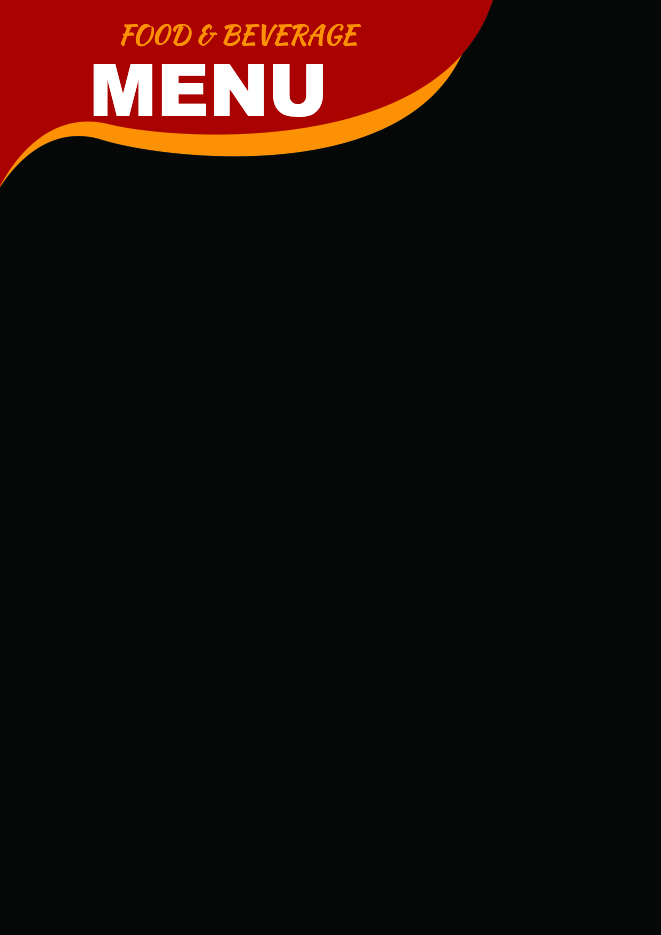
<style>
.page{position:relative;width:661px;height:935px;background:#060808}
.page>*{position:absolute;margin:0}
.t1{font:26.7px "KaushanScript-Regular";color:#fc9103}
.t2{font:71.8px "Arial-Black";color:#ffffff}
</style>
<div class="page">
<p class="t1" style="left:120px;top:24px;width:241px;height:23px">FO0D &amp; BEVERAGE</p>
<p class="t2" style="left:93px;top:64px;width:230px;height:53px">MENU</p>
</div>
